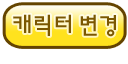
<style>
.page{position:relative;width:128px;height:64px;background:#ffffff}
.page>*{position:absolute;margin:0}
.t1{font:24px "HYnamB";letter-spacing:-0.15em;color:#7b5700}
</style>
<div class="page">
<p class="t1" style="left:13px;top:14px;width:103px;height:23px">캐릭터 변경</p>
</div>
